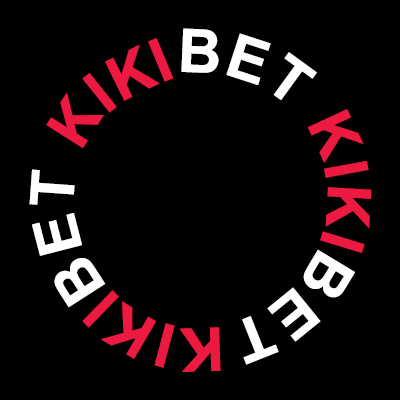
<style>
.page{position:relative;width:400px;height:400px;background:#000000}
.page>*{position:absolute;margin:0}
.t1{font:60.2px/45.1px "Arial-BoldMT";color:#ec1a41;font-weight:bold}
.t2{font:60.2px/45.1px "Arial-BoldMT";color:#ffffff;font-weight:bold}
</style>
<div class="page">
<p class="t1" style="left:29px;top:28px;width:343px;height:344px">KIKI<span class="t2">BET </span>KIKI<span class="t2">BET </span>KIKI<span class="t2">BET</span></p>
</div>
